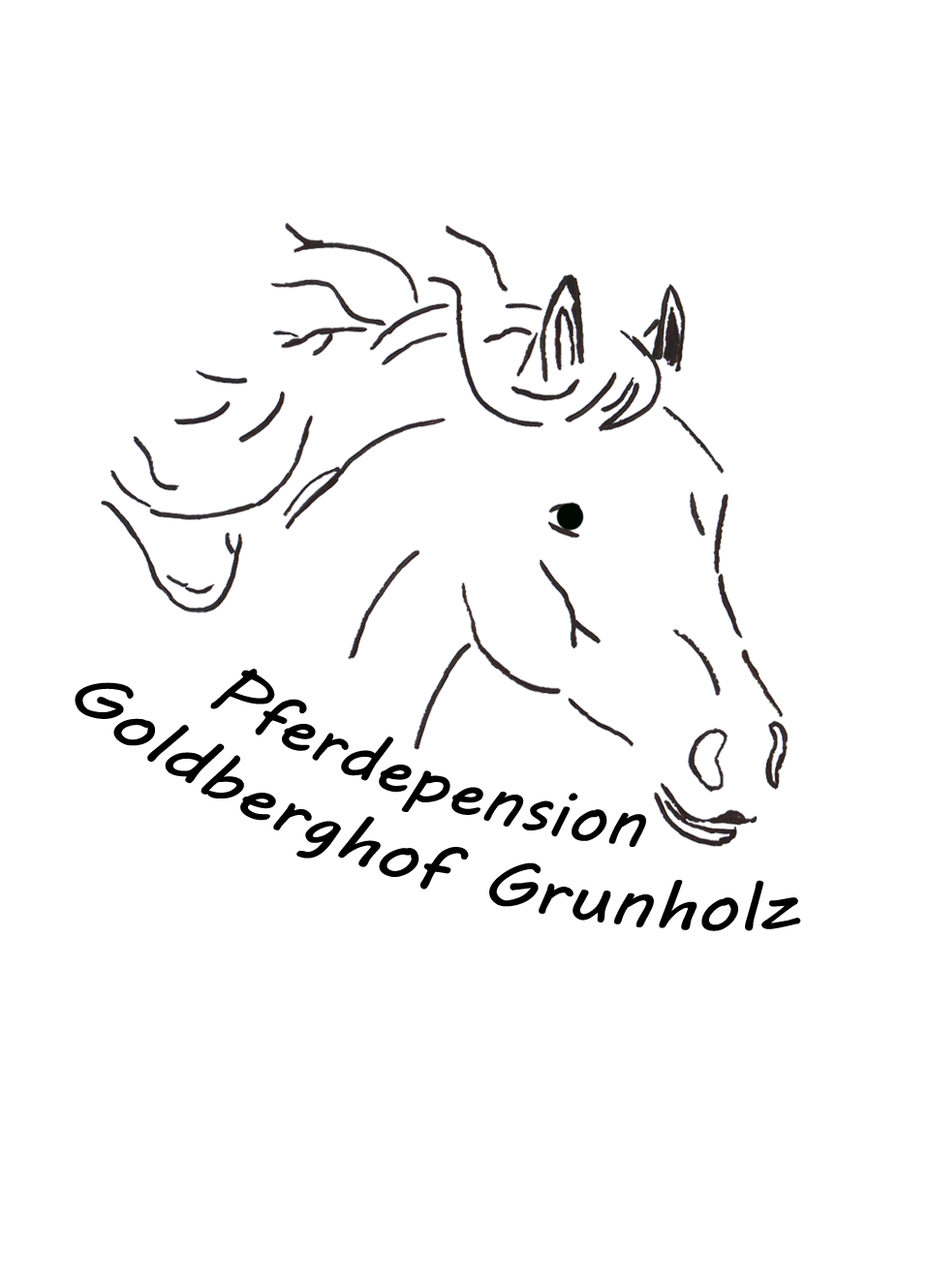
<style>
.page{position:relative;width:930px;height:1282px;background:#ffffff}
.page>*{position:absolute;margin:0}
.t1{font:66.3px "MVBoli";color:#000000}
</style>
<div class="page">
<p class="t1" style="left:75px;top:669px;width:726px;height:262px;text-align:center;rotate:17deg">Pferdepension <br>Goldberghof Grunholz</p>
</div>
